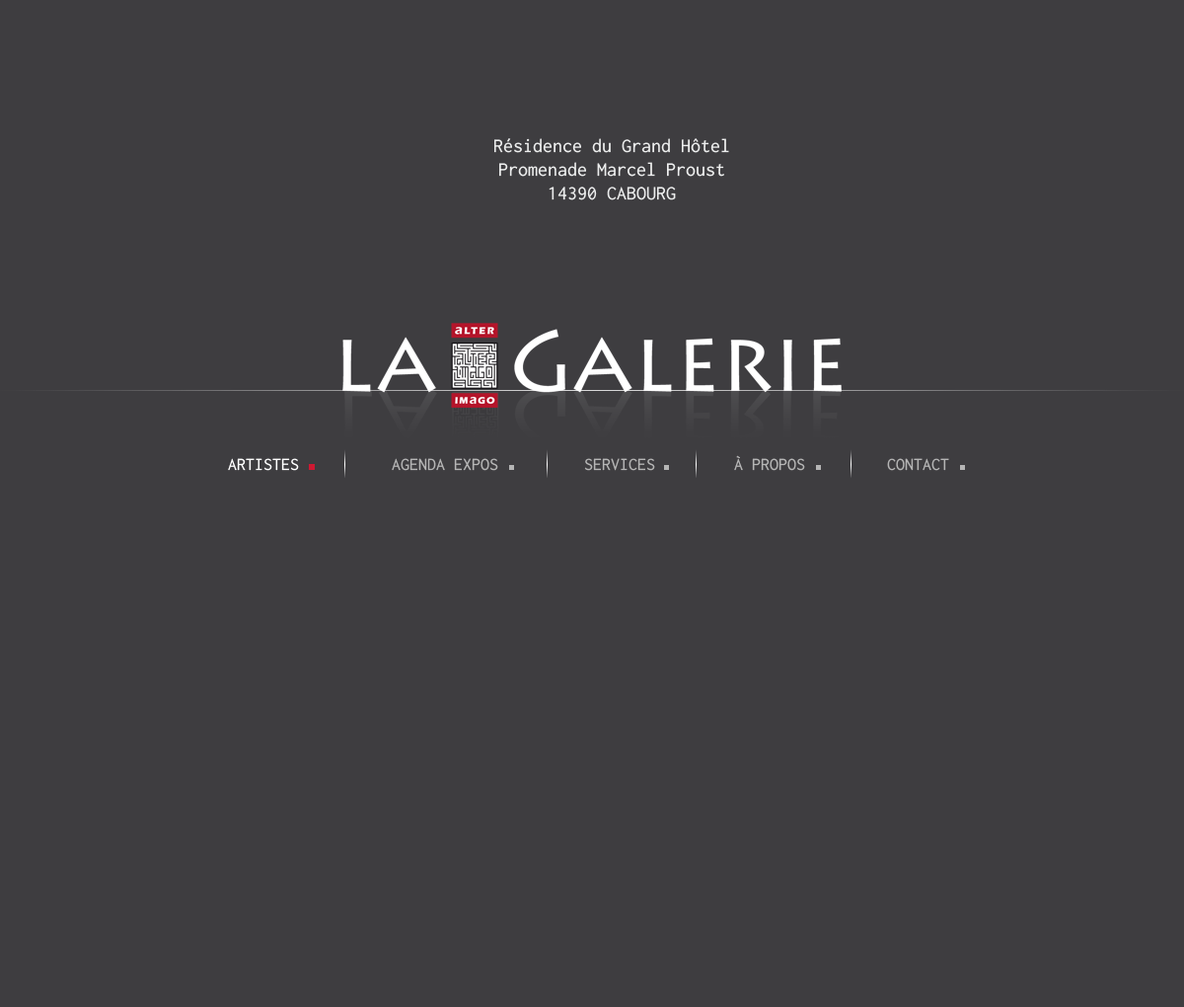
<style>
.page{position:relative;width:1184px;height:1007px;background:#3e3d40}
.page>*{position:absolute;margin:0}
.t1{font:19.7px "Inconsolata";color:#eceded}
.t2{font:17.8px "Inconsolata";color:#ffffff}
.t3{font:17.8px "Inconsolata";color:#b5b5b5}
</style>
<div class="page">
<p class="t1" style="left:494px;top:138px;width:235px;height:62px;text-align:center">Résidence du Grand Hôtel<br>Promenade Marcel Proust<br>14390 CABOURG</p>
<p class="t2" style="left:228px;top:458px;width:71px;height:13px">ARTISTES</p>
<p class="t3" style="left:392px;top:458px;width:106px;height:13px">AGENDA EXPOS</p>
<p class="t3" style="left:584px;top:458px;width:71px;height:13px">SERVICES</p>
<p class="t3" style="left:734px;top:455px;width:71px;height:16px">À PROPOS</p>
<p class="t3" style="left:887px;top:458px;width:63px;height:13px">CONTACT</p>
</div>
